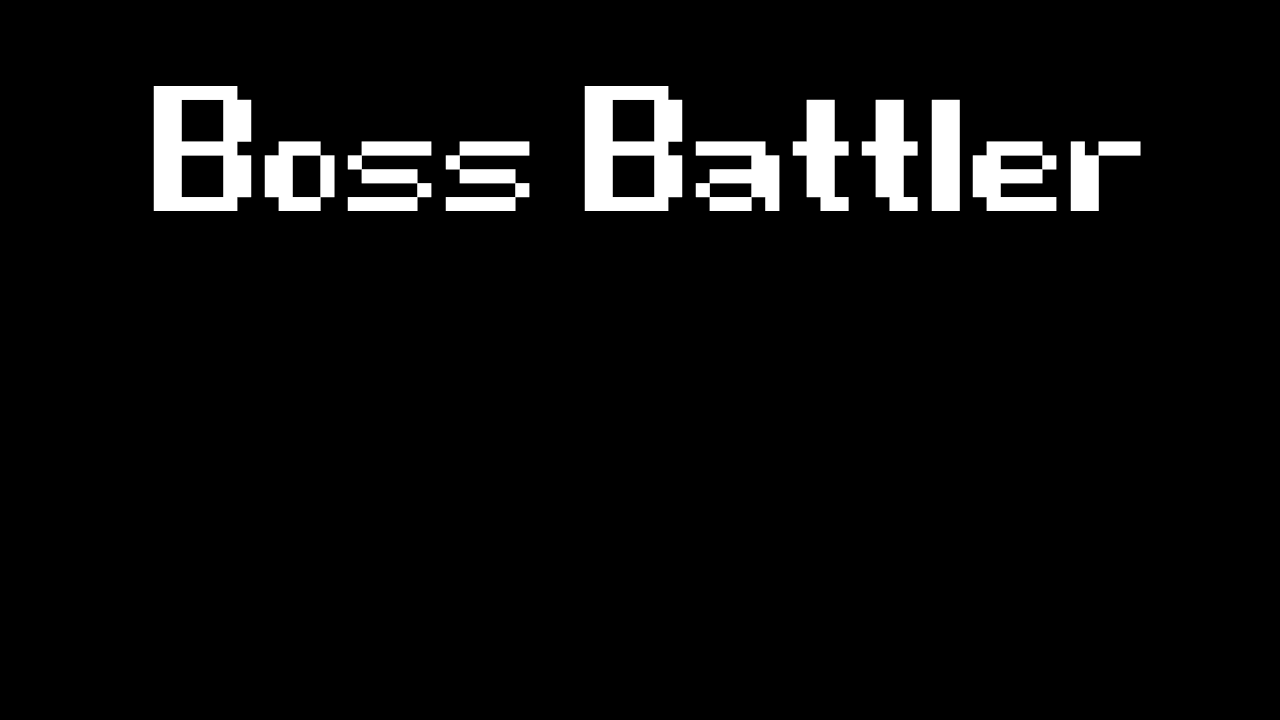
<style>
.page{position:relative;width:1280px;height:720px;background:#000000}
.page>*{position:absolute;margin:0}
.t1{font:444.4px "Game-Over";color:#ffffff}
</style>
<div class="page">
<p class="t1" style="left:153px;top:86px;width:988px;height:125px">Boss Battler</p>
</div>
